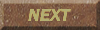
<style>
.page{position:relative;width:100px;height:30px}
.page>*{position:absolute;margin:0}
.t1{font:18px "FranklinGothic-DemiItalic";color:#b2ad72}
</style>
<div class="page">
<p class="t1" style="left:28px;top:9px;width:43px;height:12px">NEXT</p>
<p class="t1" style="left:28px;top:9px;width:43px;height:12px">NEXT</p>
</div>
